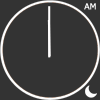
<style>
.page{position:relative;width:100px;height:100px;background:#333333}
.page>*{position:absolute;margin:0}
.t1{font:8px "Verdana";color:#ffffff}
</style>
<div class="page">
<p class="t1" style="left:84px;top:3px;width:12px;height:7px">AM</p>
</div>
